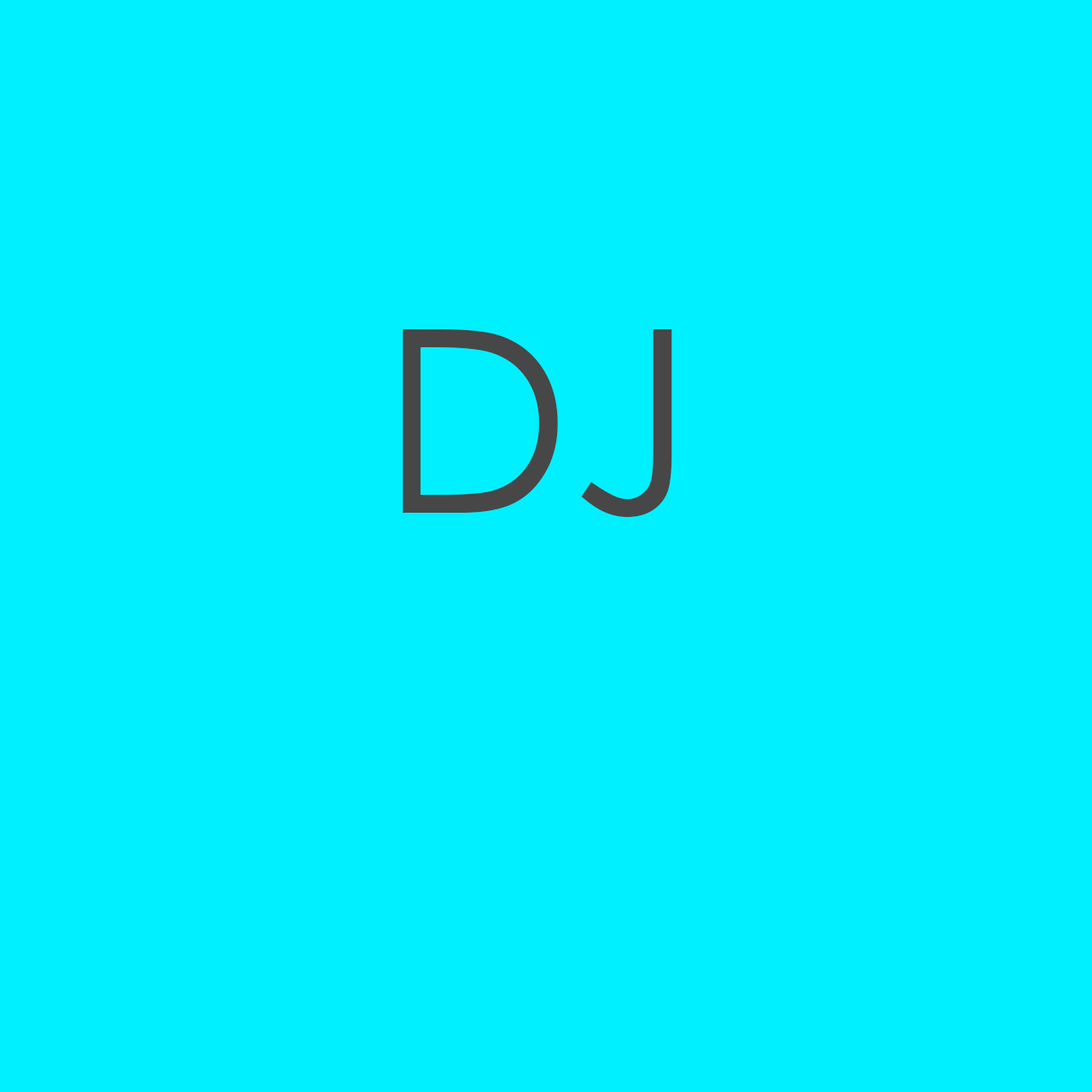
<style>
.page{position:relative;width:1092px;height:1092px;background:#00f0ff}
.page>*{position:absolute;margin:0}
.t1{font:256.2px "CenturyGothic";color:#474747}
</style>
<div class="page">
<p class="t1" style="left:403px;top:328px;width:269px;height:189px">DJ</p>
</div>
